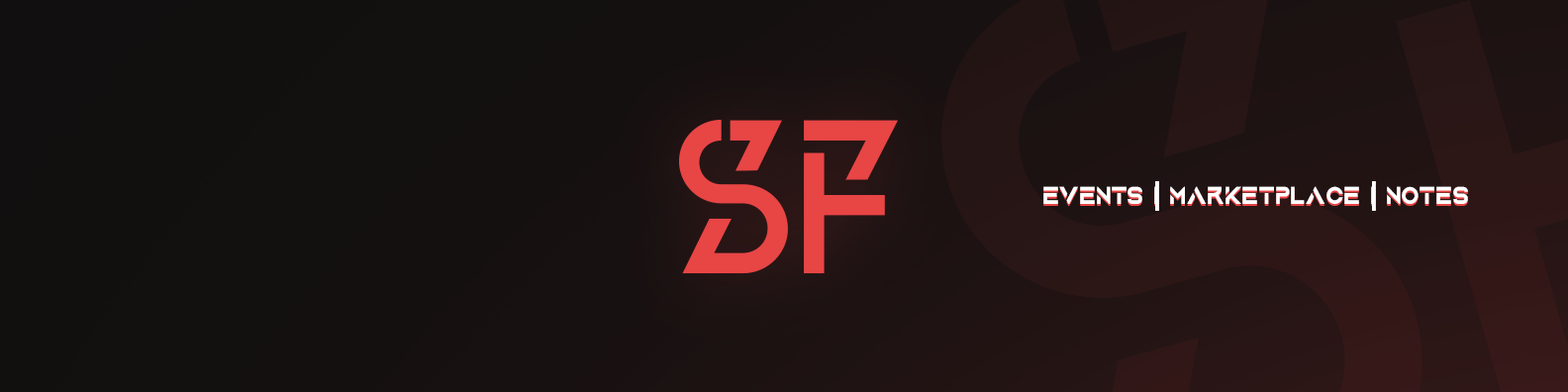
<style>
.page{position:relative;width:1568px;height:392px}
.page>*{position:absolute;margin:0}
.t1{font:25.8px "AquireBold";letter-spacing:-0.02em;scale:0.95 1}
.t2{font:25.8px "AquireBold";letter-spacing:-0.02em;color:#ffffff;scale:0.95 1}
</style>
<div class="page">
<p class="t1" style="left:1043px;top:188px;width:425px;height:18px">Events | Marketplace | Notes</p>
<p class="t2" style="left:1043px;top:186px;width:425px;height:18px">Events | Marketplace | Notes</p>
</div>
